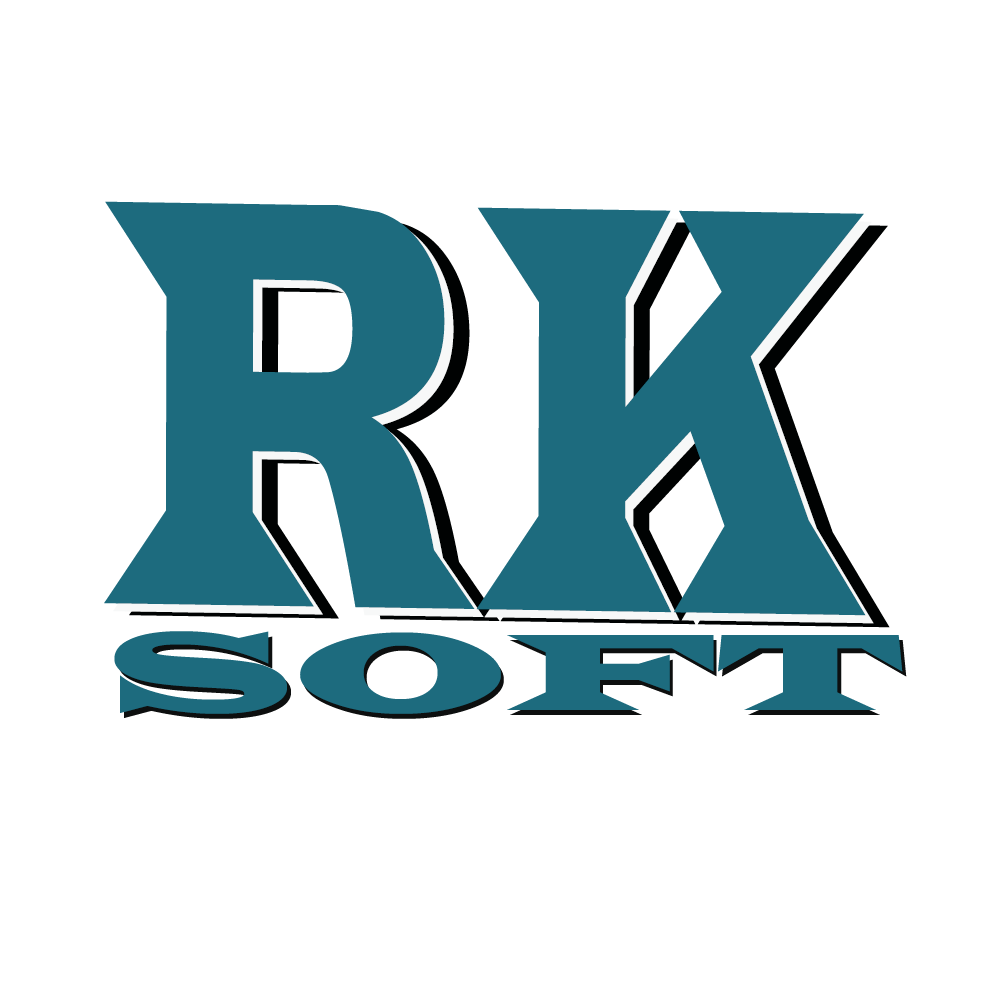
<style>
.page{position:relative;width:1000px;height:1000px;background:#ffffff}
.page>*{position:absolute;margin:0}
.t1{font:602px "LatinWide";color:#1d6b7e;scale:0.42 1}
.t2{font:112.5px "LatinWide";color:#1d6b7e;scale:1.4 1}
</style>
<div class="page">
<p class="t1" style="left:104px;top:201px;width:762px;height:415px;rotate:1deg">RK</p>
<p class="t1" style="left:113px;top:209px;width:761px;height:415px;rotate:1deg">RK</p>
<p class="t1" style="left:129px;top:213px;width:761px;height:415px;rotate:1deg">RK</p>
<p class="t2" style="left:114px;top:631px;width:789px;height:83px">SOFT</p>
<p class="t2" style="left:118px;top:636px;width:789px;height:83px">SOFT</p>
</div>
